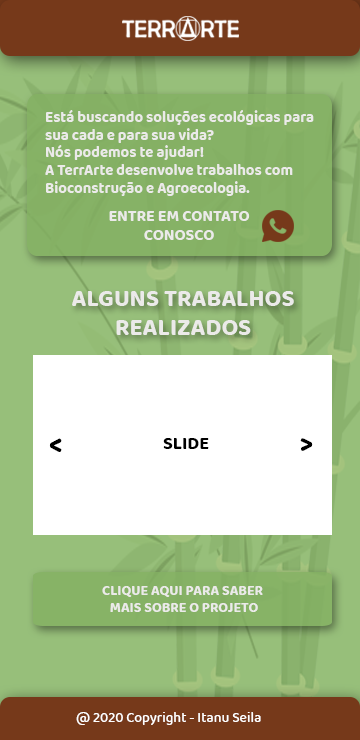
<style>
.page{position:relative;width:360px;height:740px}
.page>*{position:absolute;margin:0}
.t1{font:14.8px "Baloo2-Bold";color:#ebeae9}
.t2{font:15.5px "Baloo2-Bold";color:#ebeae9}
.t3{font:24px "Baloo2-Bold";color:#ebeae9}
.t4{font:26.6px "Baloo2-Bold";color:#000000}
.t5{font:18px "Baloo2-Bold";color:#000000}
.t6{font:14px "Baloo2-Bold";color:#ebeae9}
.t7{font:14px "Baloo2-Medium";color:#ffffff}
</style>
<div class="page">
<p class="t1" style="left:45px;top:110px;width:269px;height:86px">Está buscando soluções ecológicas para <br>sua cada e para sua vida?<br>Nós podemos te ajudar!<br>A TerrArte desenvolve trabalhos com<br>Bioconstrução e Agroecologia.</p>
<p class="t2" style="left:109px;top:211px;width:141px;height:29px;text-align:center">ENTRE EM CONTATO<br>CONOSCO</p>
<p class="t3" style="left:72px;top:291px;width:222px;height:44px;text-align:center">ALGUNS TRABALHOS<br>REALIZADOS</p>
<p class="t4" style="left:49px;top:438px;width:13px;height:14px">&lt;</p>
<p class="t5" style="left:163px;top:438px;width:46px;height:11px">SLIDE</p>
<p class="t4" style="left:300px;top:438px;width:13px;height:13px;rotate:179deg">&lt;</p>
<p class="t6" style="left:102px;top:586px;width:161px;height:26px;text-align:center">CLIQUE AQUI PARA SABER <br>MAIS SOBRE O PROJETO</p>
<p class="t7" style="left:76px;top:712px;width:185px;height:13px">@ 2020 Copyright - Itanu Seila</p>
</div>
